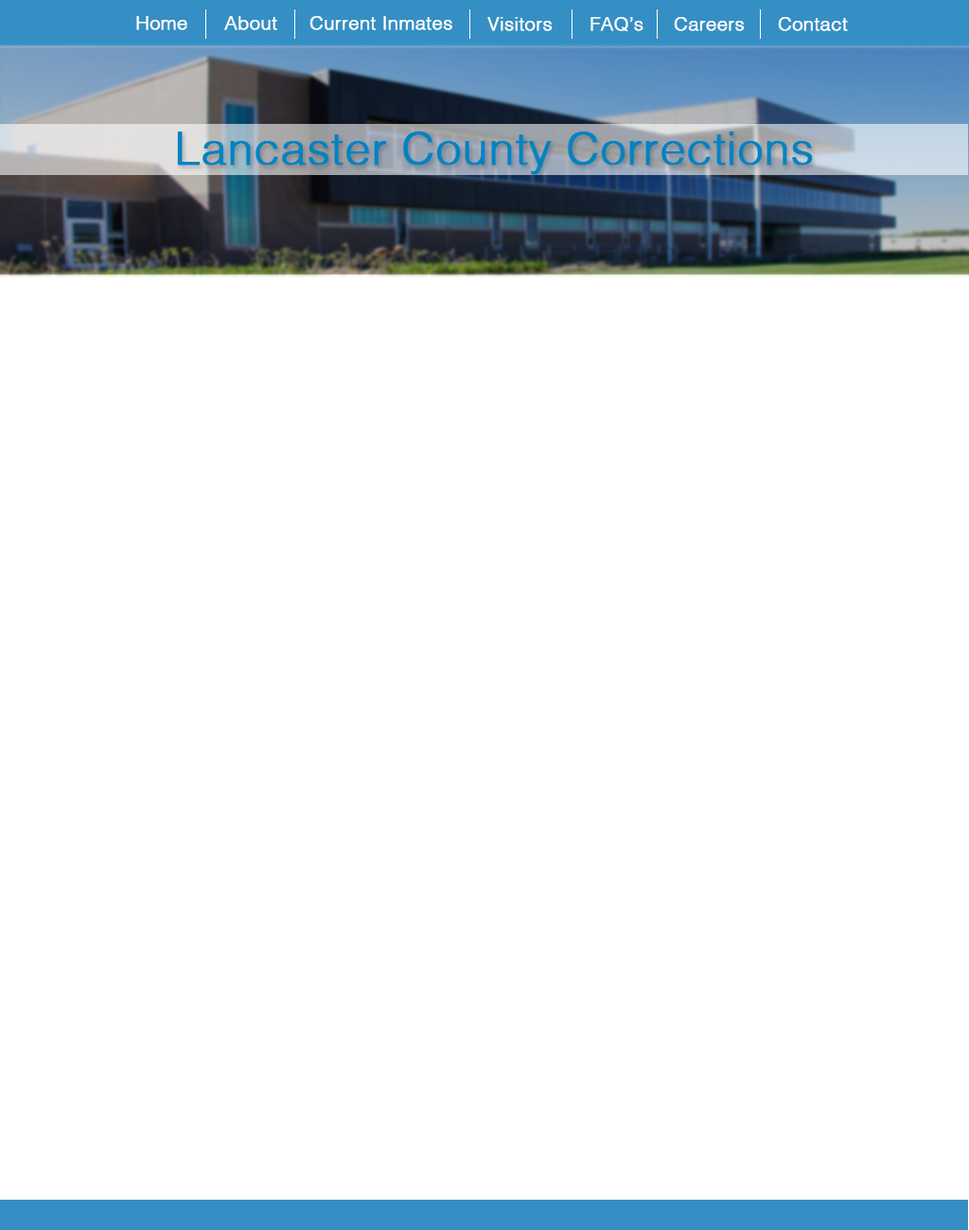
<style>
.page{position:relative;width:969px;height:1230px;background:#ffffff}
.page>*{position:absolute;margin:0}
.t1{font:18.9px "Helvetica-Light";color:#ffffff;font-weight:bold}
.t2{font:45.4px "Helvetica-Light";color:#0083c2;font-weight:bold}
</style>
<div class="page">
<p class="t1" style="left:136px;top:16px;width:51px;height:14px">Home</p>
<p class="t1" style="left:224px;top:16px;width:53px;height:14px">About</p>
<p class="t1" style="left:309px;top:16px;width:143px;height:14px">Current Inmates</p>
<p class="t1" style="left:487px;top:17px;width:66px;height:14px">Visitors</p>
<p class="t1" style="left:591px;top:17px;width:53px;height:14px">FAQ’s</p>
<p class="t1" style="left:674px;top:17px;width:71px;height:14px">Careers</p>
<p class="t1" style="left:778px;top:17px;width:70px;height:14px">Contact</p>
<p class="t2" style="left:177px;top:132px;width:636px;height:43px">Lancaster County Corrections</p>
</div>
